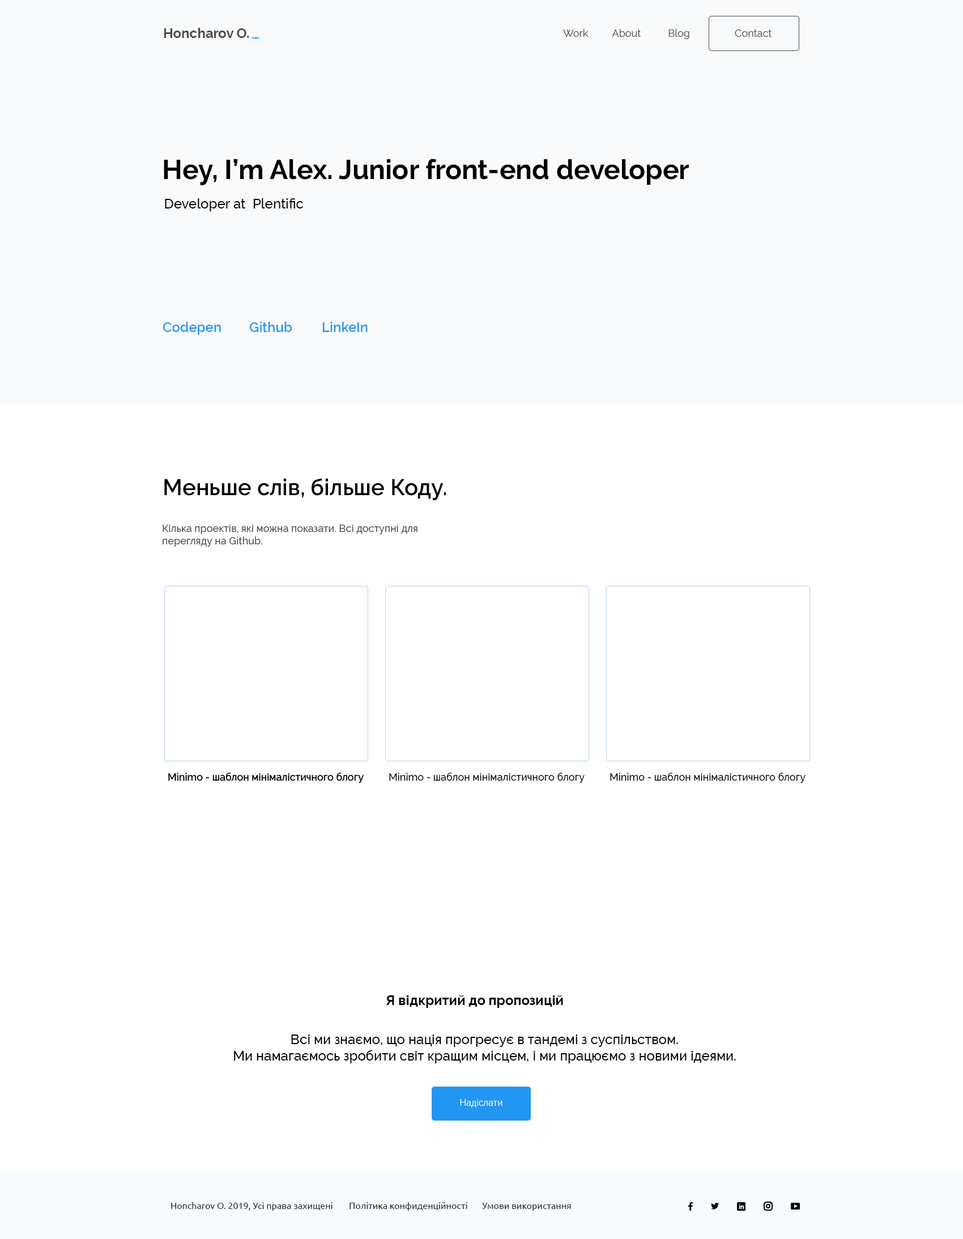
<style>
.page{position:relative;width:963px;height:1239px;background:#ffffff}
.page>*{position:absolute;margin:0}
.t1{font:13.6px "Raleway-Bold";color:#4d4d4d}
.t2{font:10.2px "Raleway-Regular";color:#4d4d4d}
.t3{font:27.2px "Raleway-Bold";color:#000000}
.t4{font:13.6px "Raleway-Medium";color:#000000}
.t5{font:13.6px "Raleway-SemiBold";color:#2196f3}
.t6{font:22.7px "Raleway-SemiBold";color:#000000}
.t7{font:10.2px "Raleway-Medium";color:#4d4d4d}
.t8{font:10.2px "Raleway-Medium";color:#000000}
.t9{font:13.6px "Raleway-Bold";color:#000000}
.t10{font:9.1px "Raleway-Regular";color:#ffffff}
.t11{font:9.1px "Ubuntu";color:#2c2c2c}
</style>
<div class="page">
<p class="t1" style="left:164px;top:28px;width:85px;height:10px">Honcharov O.</p>
<p class="t2" style="left:563px;top:29px;width:126px;height:10px">Work About Blog</p>
<p class="t2" style="left:735px;top:29px;width:37px;height:8px">Contact</p>
<p class="t3" style="left:164px;top:159px;width:525px;height:26px">Hey, I’m Alex. Junior front-end developer</p>
<p class="t4" style="left:165px;top:198px;width:139px;height:13px">Developer at  Plentific</p>
<p class="t5" style="left:163px;top:322px;width:58px;height:13px">Codepen</p>
<p class="t5" style="left:249px;top:322px;width:43px;height:10px">Github</p>
<p class="t5" style="left:322px;top:322px;width:46px;height:10px">LinkeIn</p>
<p class="t6" style="left:164px;top:478px;width:282px;height:22px">Меньше слів, більше Коду.</p>
<p class="t7" style="left:163px;top:524px;width:254px;height:23px">Кілька проектів, які можна показати. Всі доступні для перегляду на Github.</p>
<p class="t8" style="left:168px;top:772px;width:196px;height:11px">Minimo - шаблон мінімалістичного блогу</p>
<p class="t8" style="left:168px;top:772px;width:196px;height:11px">Minimo - шаблон мінімалістичного блогу</p>
<p class="t8" style="left:389px;top:772px;width:195px;height:11px">Minimo - шаблон мінімалістичного блогу</p>
<p class="t8" style="left:610px;top:772px;width:195px;height:11px">Minimo - шаблон мінімалістичного блогу</p>
<p class="t9" style="left:386px;top:995px;width:177px;height:12px">Я відкритий до пропозицій</p>
<p class="t4" style="left:234px;top:1034px;width:502px;height:29px;text-align:center">Всі ми знаємо, що нація прогресує в тандемі з суспільством.<br>Ми намагаємось зробити світ кращим місцем, і ми працюємо з новими ідеями.</p>
<p class="t10" style="left:460px;top:1099px;width:42px;height:8px">Надіслати</p>
<p class="t11" style="left:171px;top:1202px;width:161px;height:8px">Honcharov O. 2019, Усі права захищені</p>
<p class="t11" style="left:349px;top:1202px;width:118px;height:8px">Політика конфиденційності</p>
<p class="t11" style="left:482px;top:1202px;width:89px;height:8px">Умови використання</p>
</div>
